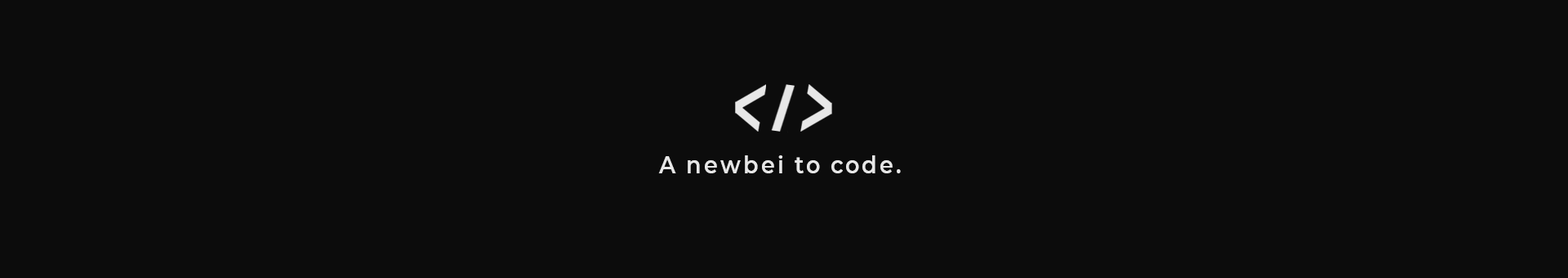
<style>
.page{position:relative;width:1568px;height:278px;background:#0c0c0c}
.page>*{position:absolute;margin:0}
.t1{font:23.9px "Montserrat-SemiBold";letter-spacing:0.11em;color:#e7e7e7;scale:0.93 1}
</style>
<div class="page">
<p class="t1" style="left:658px;top:155px;width:243px;height:18px">A newbei to code.</p>
</div>
